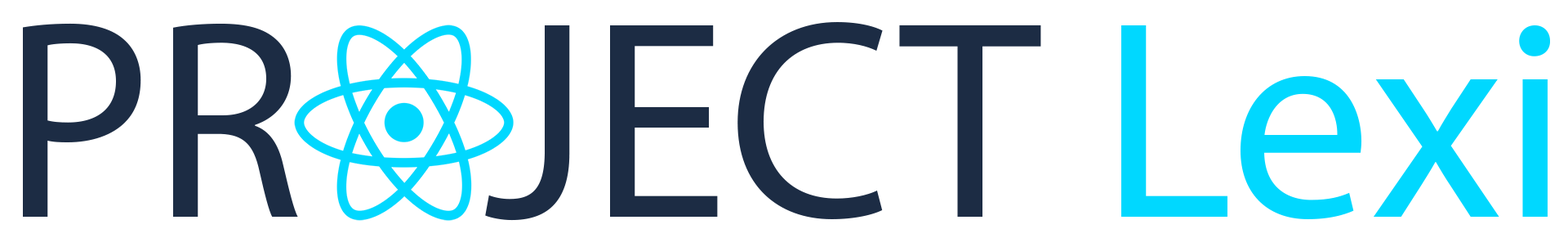
<style>
.page{position:relative;width:1568px;height:247px;background:#ffffff}
.page>*{position:absolute;margin:0}
.t1{font:282.9px "MyriadPro-Regular";color:#1c2c44}
.t2{font:282.9px "MyriadPro-Regular";color:#00d8ff}
</style>
<div class="page">
<p class="t1" style="left:23px;top:22px;width:1527px;height:198px">PR   JECT <span class="t2">Lexi</span></p>
</div>
